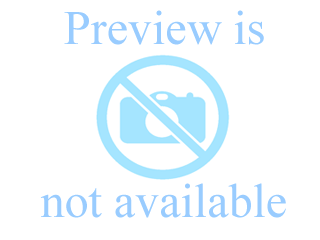
<style>
.page{position:relative;width:320px;height:240px;background:#ffffff}
.page>*{position:absolute;margin:0}
.t1{font:48px "TimesNewRomanPSMT";color:#99ccff}
</style>
<div class="page">
<p class="t1" style="left:64px;top:10px;width:200px;height:35px">Preview is</p>
<p class="t1" style="left:40px;top:183px;width:246px;height:35px">not available</p>
</div>
